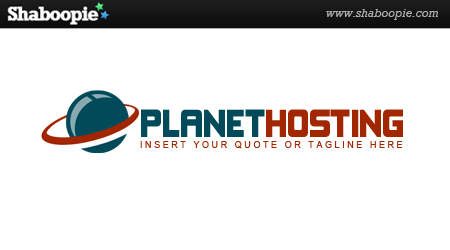
<style>
.page{position:relative;width:450px;height:250px;background:#ffffff}
.page>*{position:absolute;margin:0}
.t1{font:36px "Kimberley";color:#a22600;text-transform:uppercase}
.t2{font:36px "Kimberley";color:#004a5a;text-transform:uppercase}
.t3{font:9px "ArialMT";letter-spacing:0.285em;color:#a22600;text-transform:uppercase}
</style>
<div class="page">
<p class="t1" style="left:141px;top:109px;width:262px;height:28px"><span class="t2">planet</span>hosting</p>
<p class="t3" style="left:140px;top:141px;width:263px;height:8px">INSERT YOUR QUOTE OR TAGLINE HERE</p>
</div>
